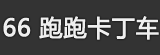
<style>
.page{position:relative;width:160px;height:55px;background:#333333}
.page>*{position:absolute;margin:0}
.t1{font:23.3px "MicrosoftYaHei";letter-spacing:0.01em;color:#efefef;font-weight:bold}
</style>
<div class="page">
<p class="t1" style="left:3px;top:16px;width:156px;height:24px">66 跑跑卡丁车</p>
</div>
